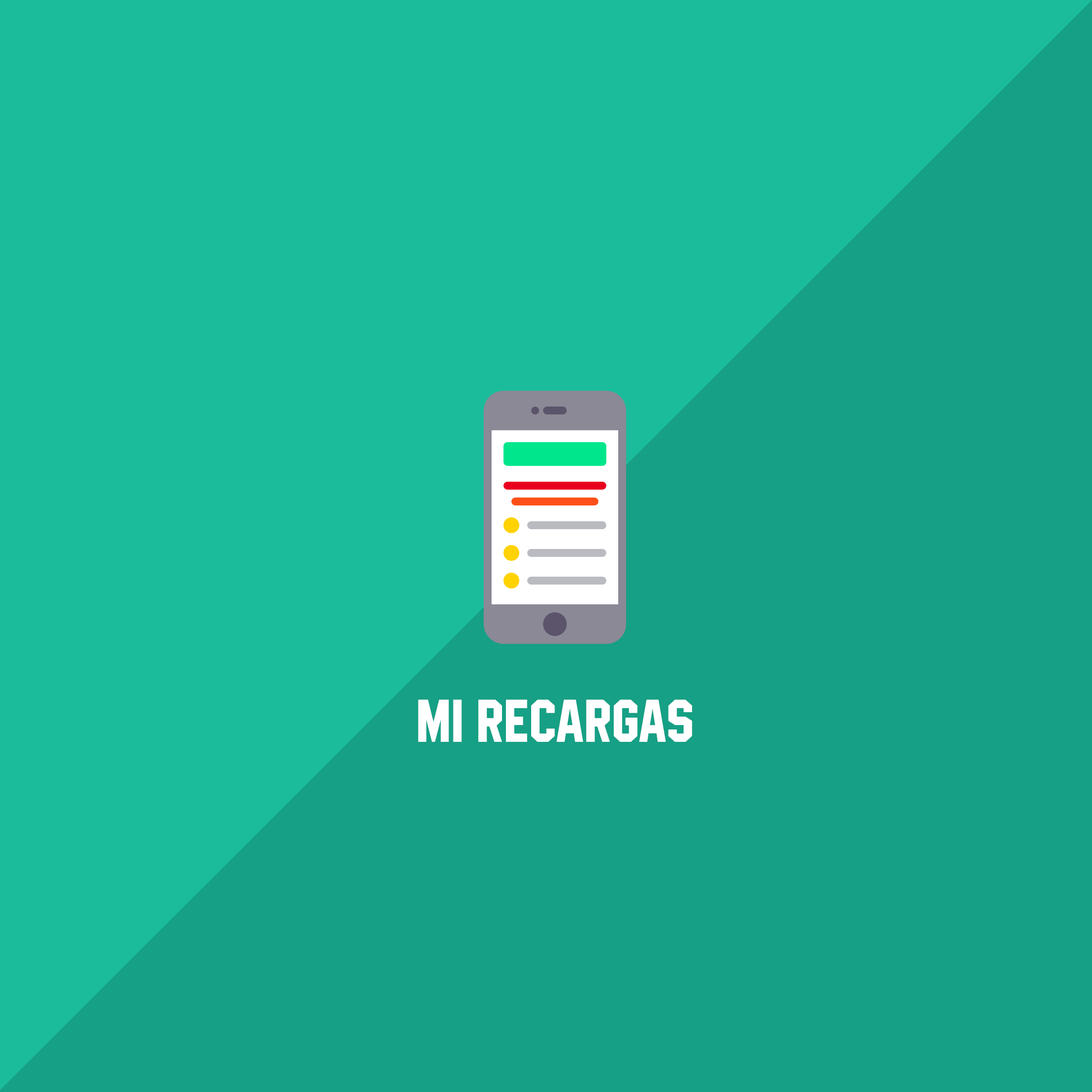
<style>
.page{position:relative;width:1092px;height:1092px;background:#1abc9c}
.page>*{position:absolute;margin:0}
.t1{font:59.3px "High-Jakarta-Regular";letter-spacing:0.01em;color:#ffffff}
</style>
<div class="page">
<p class="t1" style="left:418px;top:699px;width:274px;height:43px">Mi recargas</p>
</div>
